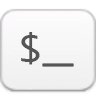
<style>
.page{position:relative;width:96px;height:96px}
.page>*{position:absolute;margin:0}
.t1{font:35.4px "Monaco";color:#555555;scale:1.13 1}
</style>
<div class="page">
<p class="t1" style="left:21px;top:32px;width:19px;height:33px">$</p>
</div>
